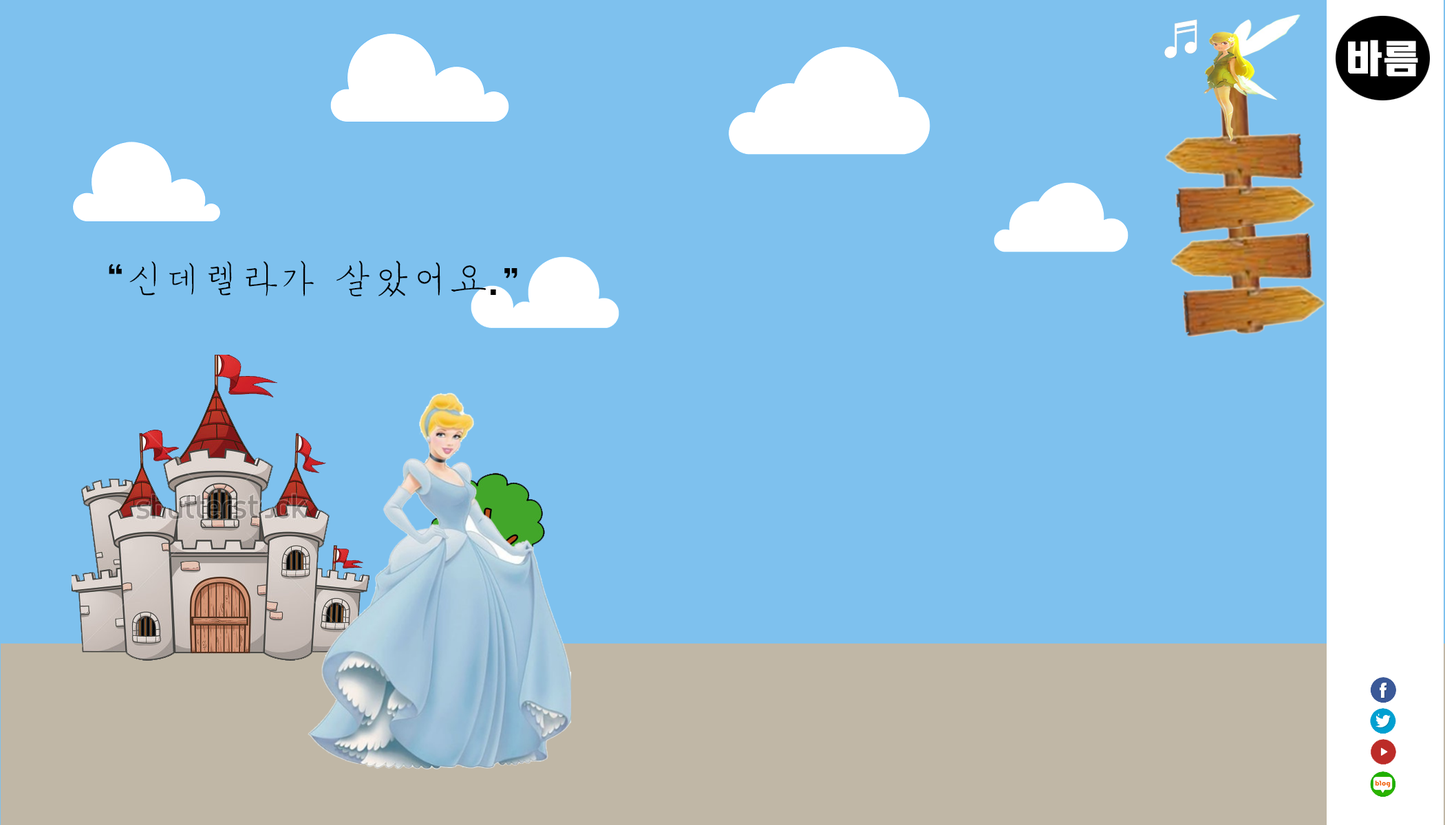
<style>
.page{position:relative;width:1445px;height:825px;background:#7ec1ee}
.page>*{position:absolute;margin:0}
.t1{font:37.8px "MSugiJeong";color:#000000}
.t2{font:37.8px "HeadlineR-HM";color:#000000}
</style>
<div class="page">
<p class="t1" style="left:109px;top:261px;width:408px;height:36px"><span class="t2">“</span>신데렐라가 살았어요<span class="t2">.”</span></p>
</div>
